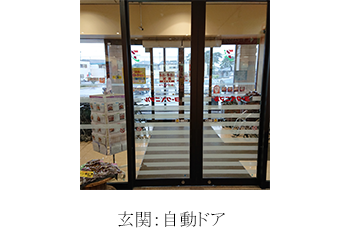
<style>
.page{position:relative;width:350px;height:250px;background:#ffffff}
.page>*{position:absolute;margin:0}
.t1{font:18px "MS-PMincho";color:#000000}
</style>
<div class="page">
<p class="t1" style="left:118px;top:211px;width:107px;height:17px">玄関：自動ドア</p>
</div>
